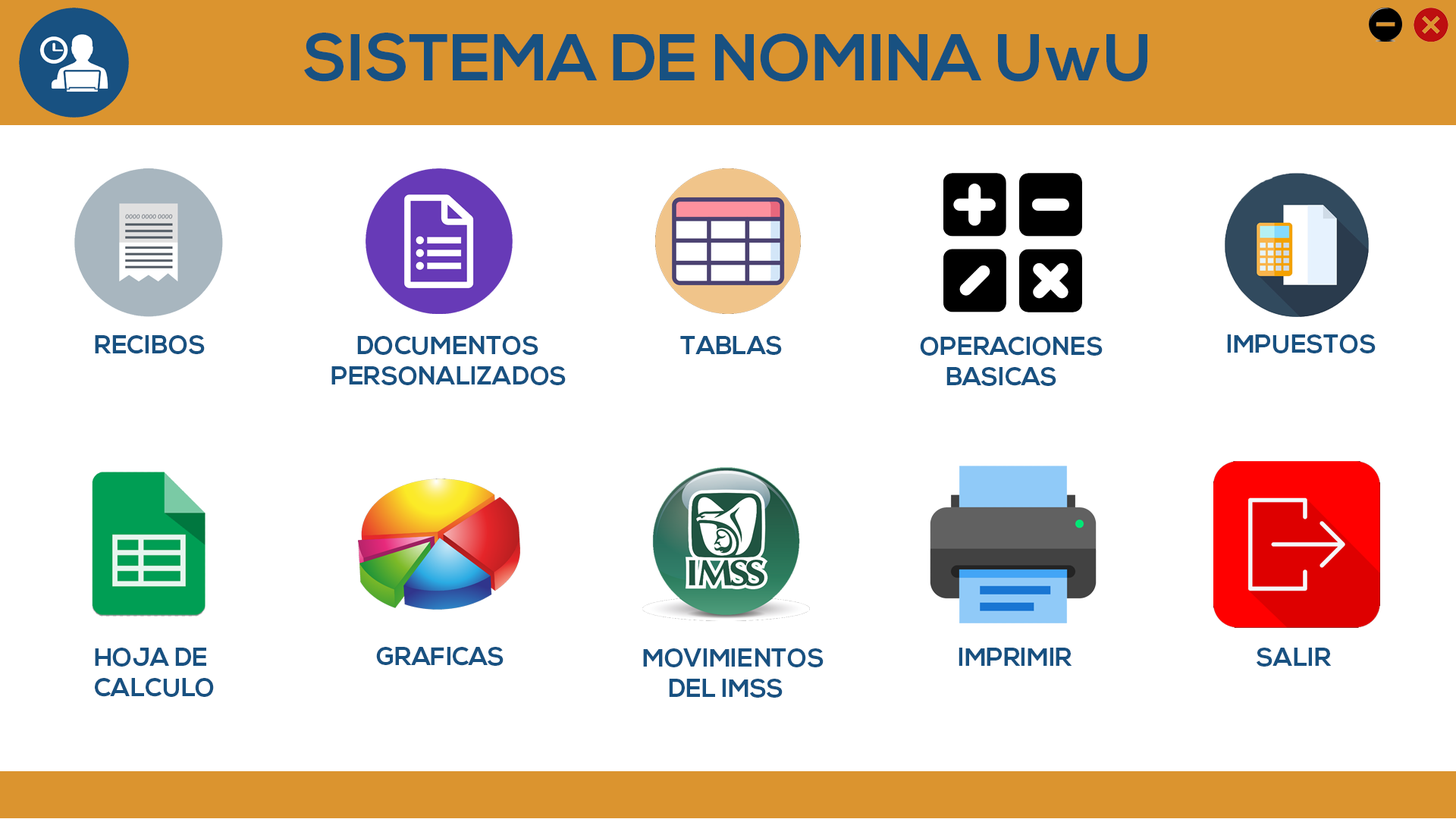
<style>
.page{position:relative;width:1456px;height:819px;background:#ffffff}
.page>*{position:absolute;margin:0}
.t1{font:66px "NexaBold";color:#185181}
.t2{font:25.3px "NexaBold";color:#185181}
</style>
<div class="page">
<p class="t1" style="left:304px;top:33px;width:843px;height:49px">SISTEMA DE NOMINA UwU</p>
<p class="t2" style="left:95px;top:335px;width:110px;height:19px">RECIBOS</p>
<p class="t2" style="left:331px;top:336px;width:235px;height:49px">DOCUMENTOS<br>PERSONALIZADOS</p>
<p class="t2" style="left:680px;top:336px;width:102px;height:19px">TABLAS</p>
<p class="t2" style="left:920px;top:337px;width:183px;height:49px">OPERACIONES<br>     BASICAS</p>
<p class="t2" style="left:1227px;top:334px;width:149px;height:19px">IMPUESTOS</p>
<p class="t2" style="left:95px;top:648px;width:119px;height:49px">HOJA DE <br>CALCULO</p>
<p class="t2" style="left:376px;top:647px;width:128px;height:19px">GRAFICAS</p>
<p class="t2" style="left:643px;top:648px;width:181px;height:50px">MOVIMIENTOS<br>     DEL IMSS</p>
<p class="t2" style="left:959px;top:648px;width:113px;height:18px">IMPRIMIR</p>
<p class="t2" style="left:1257px;top:648px;width:75px;height:19px">SALIR</p>
</div>
